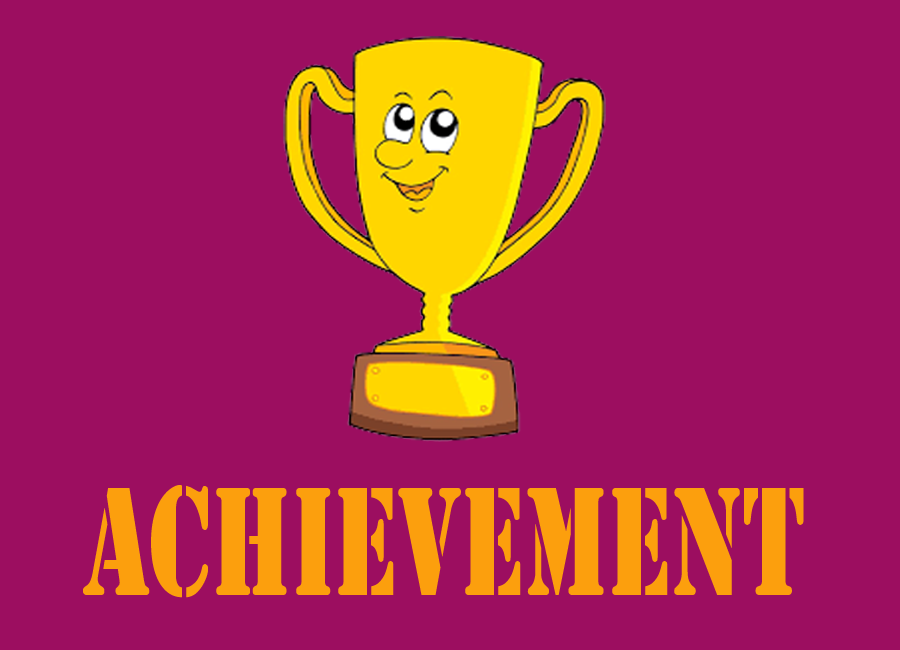
<style>
.page{position:relative;width:900px;height:650px;background:#9c0e60}
.page>*{position:absolute;margin:0}
.t1{font:160.7px "Stencil";color:#fc9f0d;scale:0.66 1}
</style>
<div class="page">
<p class="t1" style="left:83px;top:485px;width:721px;height:113px">Achievement</p>
</div>
